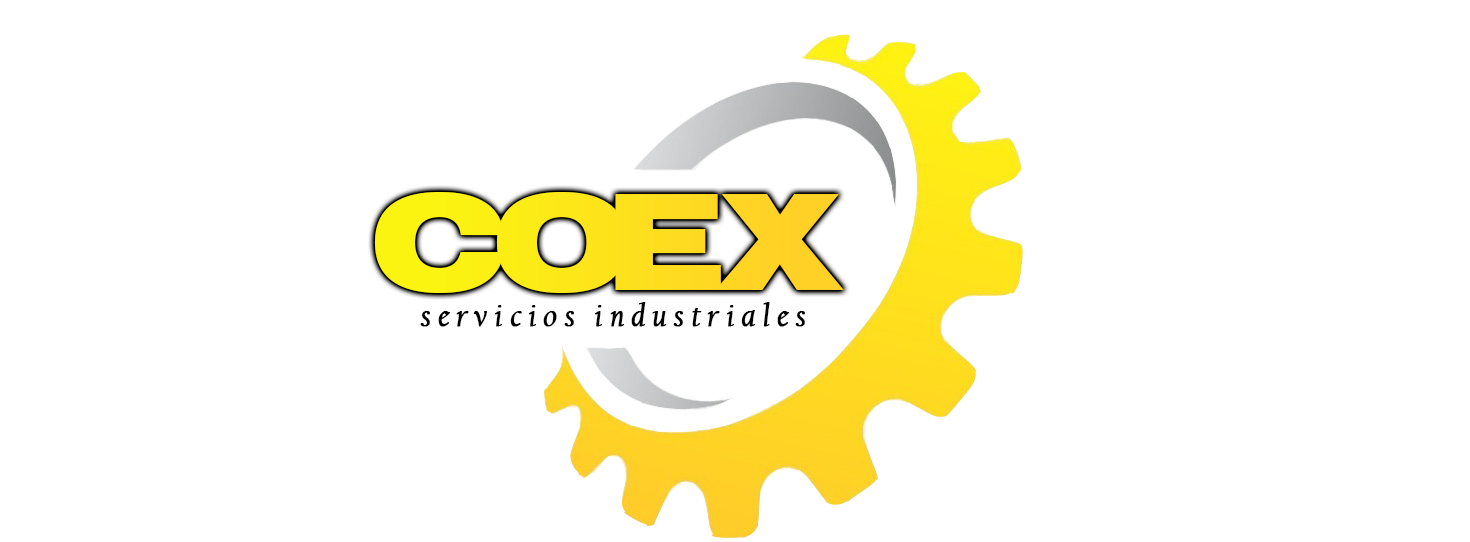
<style>
.page{position:relative;width:1470px;height:542px;background:#ffffff}
.page>*{position:absolute;margin:0}
.t1{font:133.3px "Swiss721BT-BlackExtended";letter-spacing:-0.05em;color:#fde21b}
.t2{font:133.3px "Swiss721BT-BlackExtended";letter-spacing:-0.1em;color:#fde21b}
.t3{font:133.3px "Swiss721BT-BlackExtended";letter-spacing:-0.18em;color:#fde21b}
.t4{font:32px "CalifornianFB-Italic";letter-spacing:0.2em;color:#000000;font-weight:bold}
</style>
<div class="page">
<p class="t1" style="left:374px;top:192px;width:470px;height:101px"><span class="t2">C</span><span class="t3">O</span>EX</p>
<p class="t4" style="left:420px;top:302px;width:385px;height:25px">servicios industriales</p>
</div>
